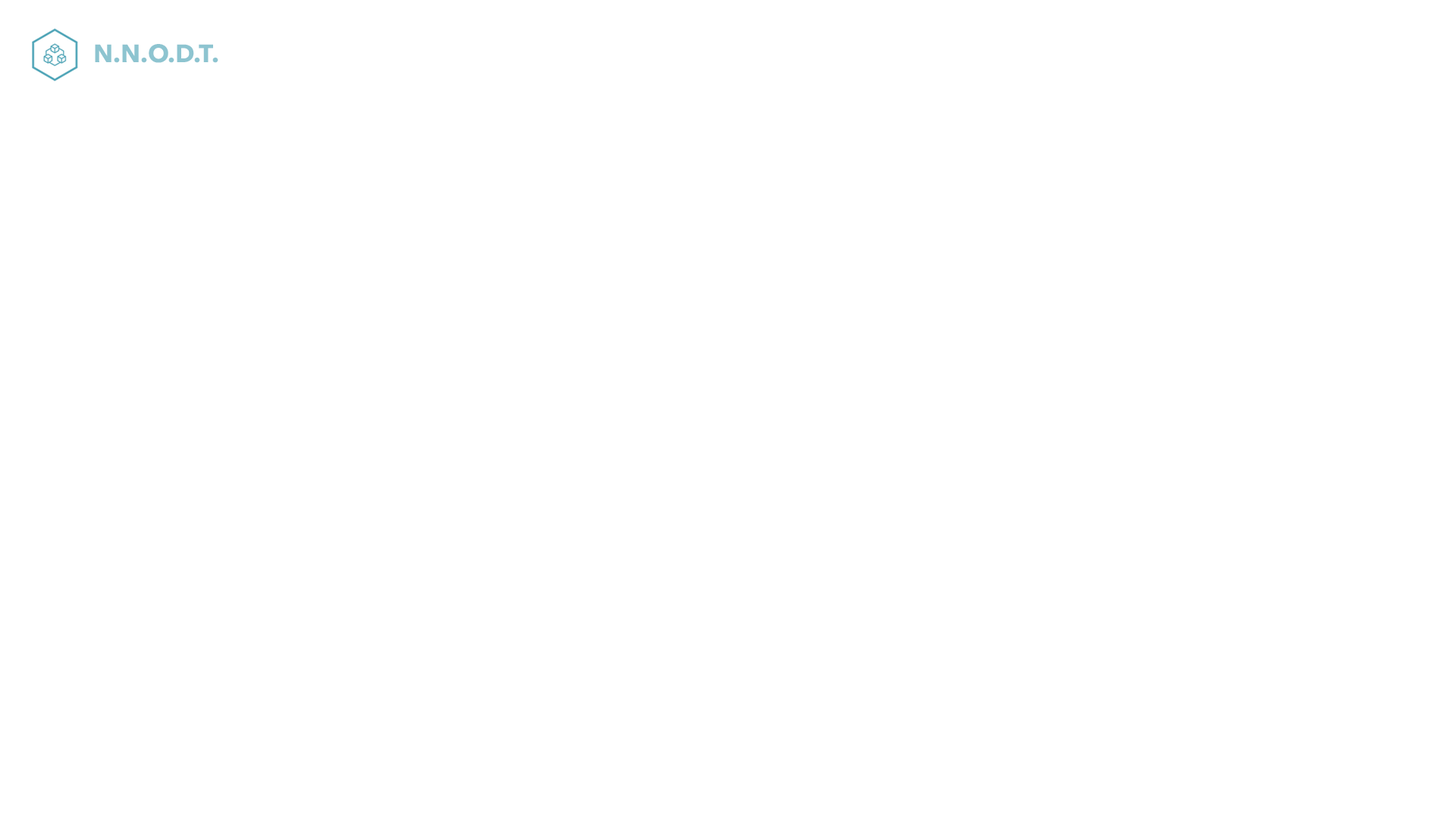
<style>
.page{position:relative;width:1456px;height:819px;background:#ffffff}
.page>*{position:absolute;margin:0}
.t1{font:25px "AvenirNextCyr-Bold";color:#8dc4d0}
</style>
<div class="page">
<p class="t1" style="left:95px;top:44px;width:123px;height:19px">N.N.O.D.T.</p>
</div>
